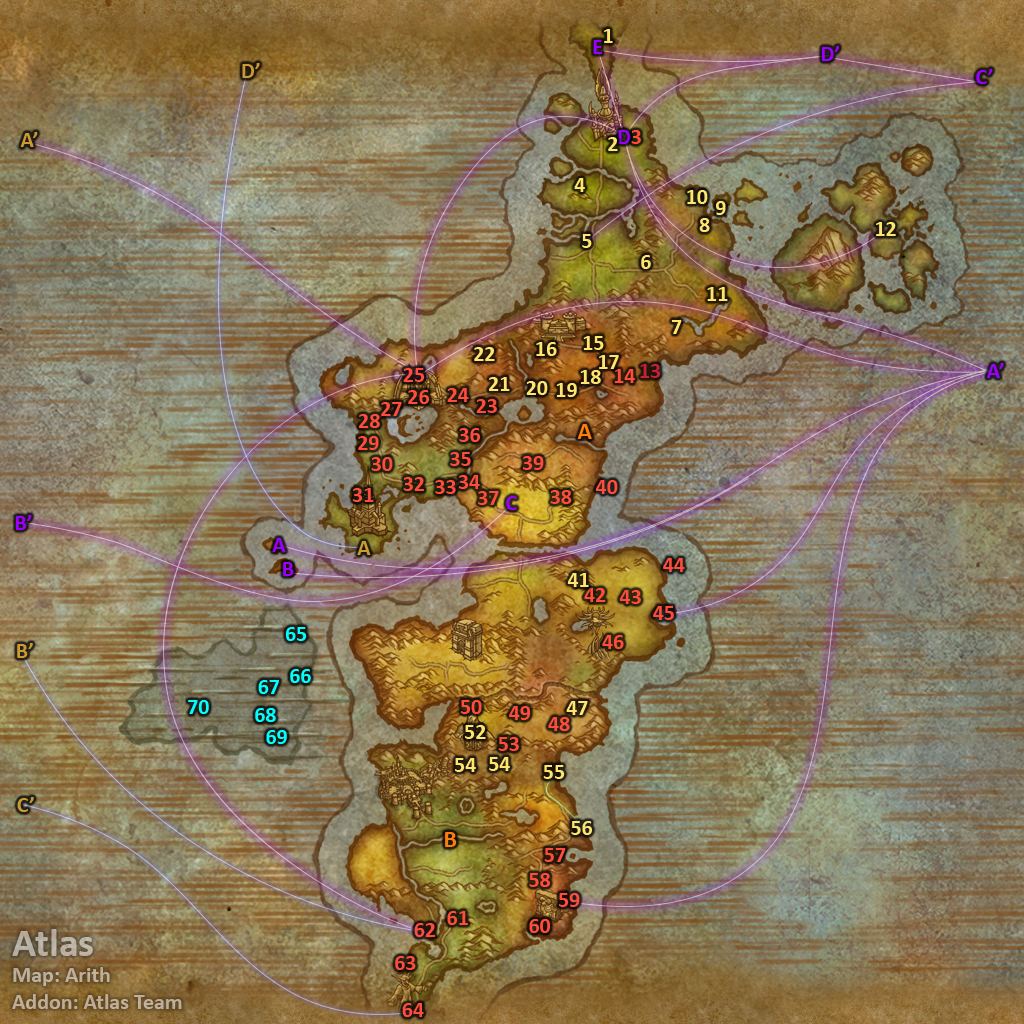
<style>
.page{position:relative;width:1024px;height:1024px}
.page>*{position:absolute;margin:0}
.t1{font:22px "Calibri-Bold";letter-spacing:-0.005em;color:#fee570}
.t2{font:22px "Calibri-Bold";color:#9900ff}
.t3{font:22px "Calibri-Bold";color:#cc9933}
.t4{font:22px "Calibri-Bold";letter-spacing:-0.005em;color:#ff4c3c}
.t5{font:22px "Calibri-Bold";letter-spacing:-0.005em;color:#c41f3b}
.t6{font:24px "Calibri-Bold";color:#ff7d0a}
.t7{font:22px "Calibri-Bold";letter-spacing:-0.005em;color:#00ffff}
.t8{font:22px "Calibri-Bold";color:#bcaf9d}
.t9{font:40px "Calibri-Bold";color:#bcaf9d}
</style>
<div class="page">
<p class="t1" style="left:604px;top:29px;width:9px;height:14px">1</p>
<p class="t2" style="left:593px;top:40px;width:9px;height:14px">E</p>
<p class="t2" style="left:822px;top:46px;width:17px;height:15px">D’</p>
<p class="t3" style="left:242px;top:63px;width:18px;height:15px">D’</p>
<p class="t2" style="left:976px;top:69px;width:17px;height:15px">C’</p>
<p class="t3" style="left:20px;top:132px;width:18px;height:15px">A’</p>
<p class="t1" style="left:608px;top:137px;width:10px;height:14px">2</p>
<p class="t2" style="left:618px;top:130px;width:13px;height:14px">D</p>
<p class="t4" style="left:631px;top:130px;width:10px;height:14px">3</p>
<p class="t1" style="left:574px;top:178px;width:11px;height:14px">4</p>
<p class="t1" style="left:687px;top:190px;width:21px;height:14px">10</p>
<p class="t1" style="left:716px;top:201px;width:10px;height:14px">9</p>
<p class="t1" style="left:699px;top:218px;width:11px;height:14px">8</p>
<p class="t1" style="left:876px;top:222px;width:20px;height:14px">12</p>
<p class="t1" style="left:582px;top:234px;width:10px;height:14px">5</p>
<p class="t1" style="left:641px;top:255px;width:10px;height:14px">6</p>
<p class="t1" style="left:707px;top:287px;width:21px;height:14px">11</p>
<p class="t1" style="left:671px;top:320px;width:11px;height:14px">7</p>
<p class="t1" style="left:536px;top:342px;width:21px;height:14px">16</p>
<p class="t1" style="left:583px;top:336px;width:21px;height:14px">15</p>
<p class="t1" style="left:474px;top:347px;width:21px;height:14px">22</p>
<p class="t1" style="left:599px;top:355px;width:20px;height:14px">17</p>
<p class="t5" style="left:640px;top:364px;width:21px;height:14px">13</p>
<p class="t2" style="left:987px;top:363px;width:17px;height:15px">A’</p>
<p class="t4" style="left:403px;top:368px;width:22px;height:14px">25</p>
<p class="t1" style="left:489px;top:377px;width:21px;height:14px">21</p>
<p class="t1" style="left:580px;top:370px;width:21px;height:14px">18</p>
<p class="t4" style="left:614px;top:369px;width:21px;height:14px">14</p>
<p class="t4" style="left:408px;top:390px;width:21px;height:14px">26</p>
<p class="t4" style="left:447px;top:388px;width:22px;height:14px">24</p>
<p class="t1" style="left:526px;top:381px;width:22px;height:14px">20</p>
<p class="t1" style="left:556px;top:383px;width:21px;height:14px">19</p>
<p class="t4" style="left:476px;top:399px;width:21px;height:14px">23</p>
<p class="t4" style="left:359px;top:414px;width:21px;height:14px">28</p>
<p class="t4" style="left:381px;top:402px;width:21px;height:14px">27</p>
<p class="t6" style="left:577px;top:424px;width:15px;height:15px">A</p>
<p class="t4" style="left:358px;top:436px;width:21px;height:14px">29</p>
<p class="t4" style="left:459px;top:428px;width:21px;height:14px">36</p>
<p class="t4" style="left:371px;top:457px;width:22px;height:14px">30</p>
<p class="t4" style="left:450px;top:452px;width:21px;height:14px">35</p>
<p class="t4" style="left:522px;top:456px;width:22px;height:14px">39</p>
<p class="t4" style="left:403px;top:477px;width:21px;height:14px">32</p>
<p class="t4" style="left:435px;top:480px;width:21px;height:14px">33</p>
<p class="t4" style="left:458px;top:475px;width:22px;height:14px">34</p>
<p class="t4" style="left:595px;top:480px;width:23px;height:14px">40</p>
<p class="t4" style="left:352px;top:488px;width:22px;height:14px">31</p>
<p class="t4" style="left:478px;top:491px;width:21px;height:14px">37</p>
<p class="t2" style="left:506px;top:496px;width:11px;height:14px">C</p>
<p class="t4" style="left:550px;top:490px;width:22px;height:14px">38</p>
<p class="t2" style="left:16px;top:515px;width:16px;height:15px">B’</p>
<p class="t2" style="left:272px;top:538px;width:14px;height:14px">A</p>
<p class="t3" style="left:357px;top:541px;width:14px;height:14px">A</p>
<p class="t4" style="left:663px;top:558px;width:22px;height:14px">44</p>
<p class="t2" style="left:283px;top:562px;width:11px;height:14px">B</p>
<p class="t1" style="left:567px;top:573px;width:22px;height:14px">41</p>
<p class="t4" style="left:584px;top:588px;width:22px;height:14px">42</p>
<p class="t4" style="left:619px;top:590px;width:22px;height:14px">43</p>
<p class="t4" style="left:653px;top:606px;width:21px;height:14px">45</p>
<p class="t7" style="left:286px;top:627px;width:21px;height:14px">65</p>
<p class="t4" style="left:602px;top:635px;width:22px;height:14px">46</p>
<p class="t3" style="left:17px;top:643px;width:16px;height:15px">B’</p>
<p class="t7" style="left:290px;top:669px;width:21px;height:14px">66</p>
<p class="t7" style="left:258px;top:680px;width:21px;height:14px">67</p>
<p class="t7" style="left:188px;top:700px;width:21px;height:14px">70</p>
<p class="t4" style="left:461px;top:700px;width:21px;height:14px">50</p>
<p class="t1" style="left:566px;top:701px;width:22px;height:14px">47</p>
<p class="t7" style="left:255px;top:708px;width:21px;height:14px">68</p>
<p class="t4" style="left:509px;top:706px;width:21px;height:14px">49</p>
<p class="t1" style="left:465px;top:725px;width:21px;height:14px">52</p>
<p class="t4" style="left:548px;top:717px;width:22px;height:14px">48</p>
<p class="t7" style="left:266px;top:730px;width:21px;height:14px">69</p>
<p class="t4" style="left:498px;top:737px;width:21px;height:14px">53</p>
<p class="t1" style="left:455px;top:758px;width:21px;height:14px">54</p>
<p class="t1" style="left:489px;top:757px;width:21px;height:14px">54</p>
<p class="t1" style="left:543px;top:765px;width:22px;height:14px">55</p>
<p class="t3" style="left:17px;top:797px;width:17px;height:15px">C’</p>
<p class="t1" style="left:571px;top:821px;width:21px;height:14px">56</p>
<p class="t6" style="left:445px;top:832px;width:12px;height:15px">B</p>
<p class="t4" style="left:544px;top:848px;width:22px;height:14px">57</p>
<p class="t4" style="left:529px;top:873px;width:21px;height:14px">58</p>
<p class="t4" style="left:559px;top:893px;width:21px;height:14px">59</p>
<p class="t4" style="left:447px;top:911px;width:21px;height:14px">61</p>
<p class="t8" style="left:12px;top:929px;width:170px;height:80px"><span class="t9">Atlas<br></span>Map: Arith<br>Addon: Atlas Team</p>
<p class="t4" style="left:414px;top:923px;width:21px;height:14px">62</p>
<p class="t4" style="left:529px;top:919px;width:21px;height:14px">60</p>
<p class="t4" style="left:395px;top:956px;width:21px;height:14px">63</p>
<p class="t4" style="left:402px;top:1003px;width:22px;height:14px">64</p>
</div>
